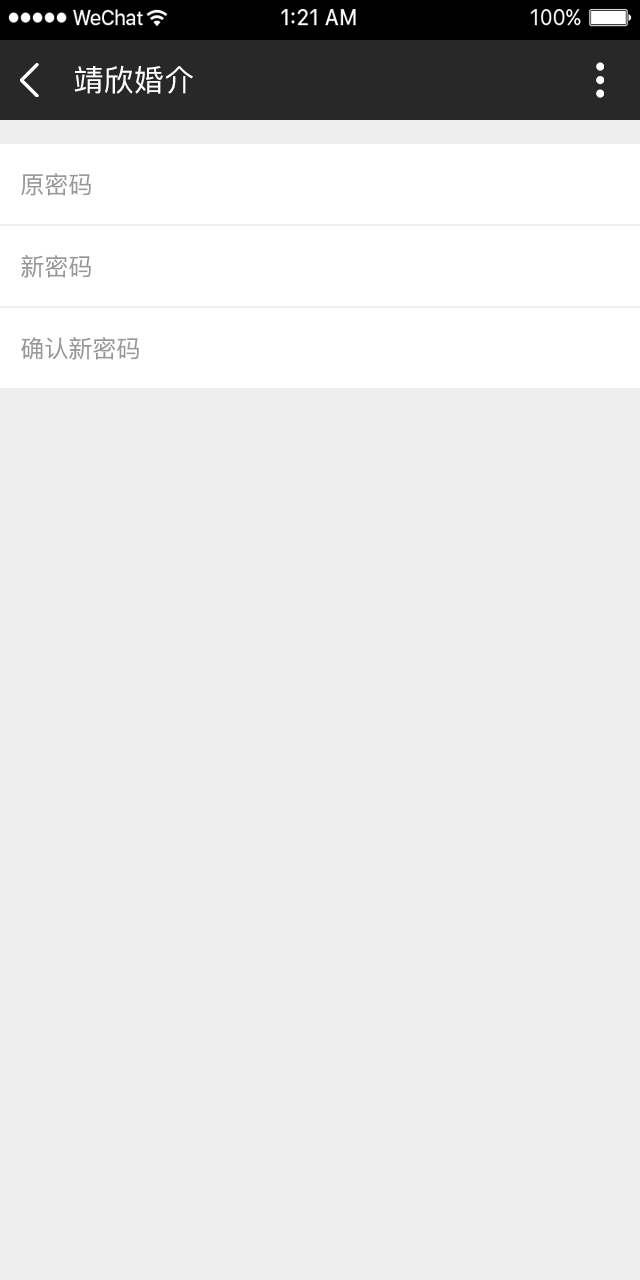
<style>
.page{position:relative;width:640px;height:1280px;background:#ededed}
.page>*{position:absolute;margin:0}
.t1{font:30px "PingFang-SC-Medium";letter-spacing:0.01em;color:#ffffff;text-transform:uppercase}
.t2{font:24px "PingFang-SC-Medium";color:#989898;text-transform:uppercase}
</style>
<div class="page">
<p class="t1" style="left:74px;top:65px;width:119px;height:29px">靖欣婚介</p>
<p class="t2" style="left:21px;top:173px;width:70px;height:23px">原密码</p>
<p class="t2" style="left:21px;top:255px;width:70px;height:23px">新密码</p>
<p class="t2" style="left:21px;top:337px;width:118px;height:23px">确认新密码</p>
</div>
